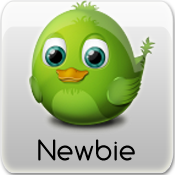
<style>
.page{position:relative;width:175px;height:175px}
.page>*{position:absolute;margin:0}
.t1{font:30px "Comfortaa";color:#000000}
</style>
<div class="page">
<p class="t1" style="left:38px;top:139px;width:97px;height:22px">Newbie</p>
</div>
